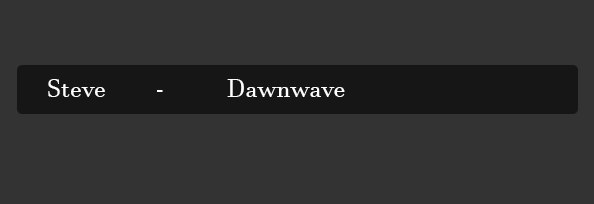
<style>
.page{position:relative;width:594px;height:204px;background:#333333}
.page>*{position:absolute;margin:0}
.t1{font:25px "JavaneseText";color:#ffffff}
</style>
<div class="page">
<p class="t1" style="left:48px;top:79px;width:297px;height:18px">Steve  -  Dawnwave</p>
</div>
